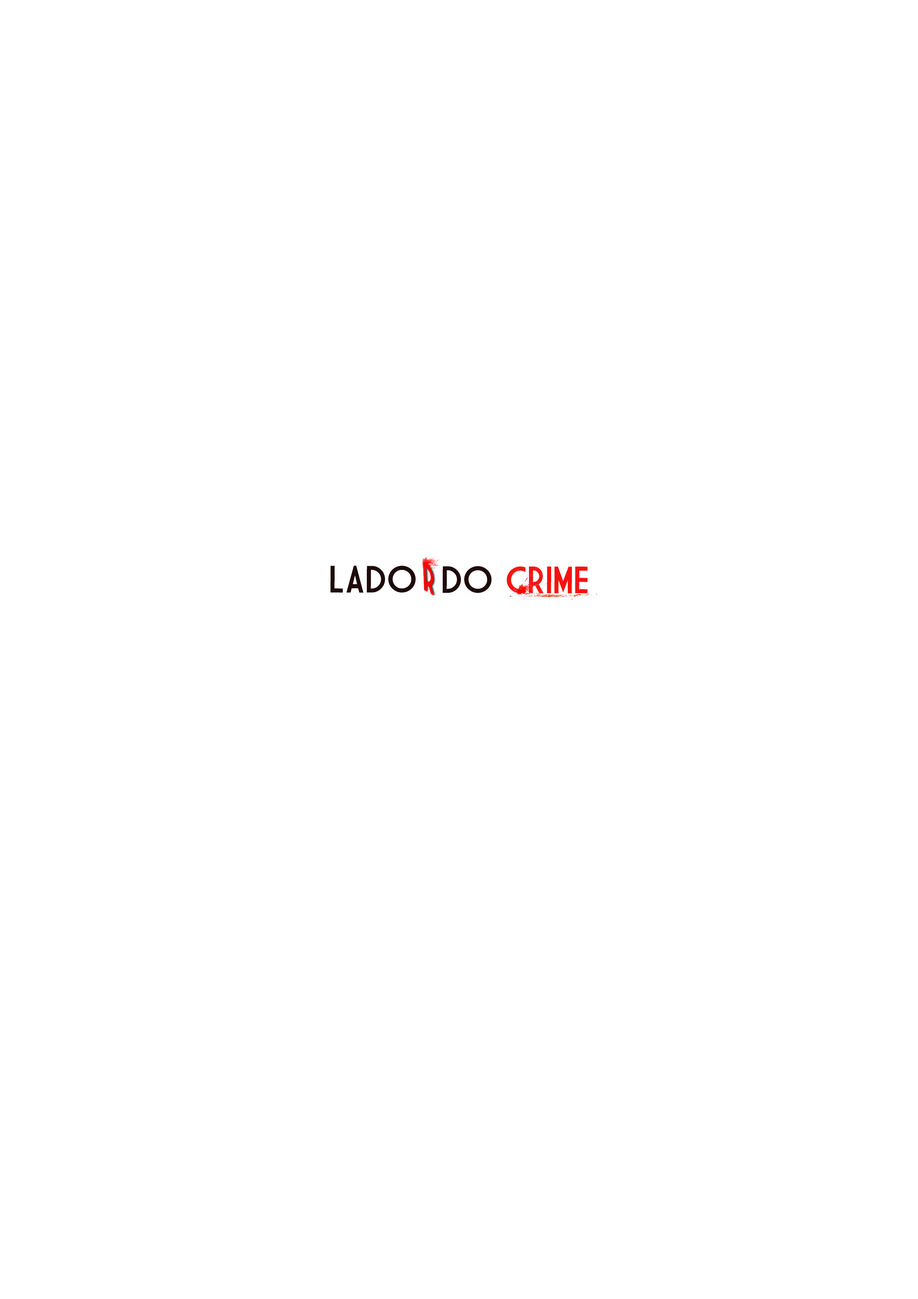
<style>
.page{position:relative;width:918px;height:1299px;background:#ffffff}
.page>*{position:absolute;margin:0}
.t1{font:37px "MarketDeco";letter-spacing:-0.025em;color:#1e0a0a}
.t2{font:37px "MarketDeco";letter-spacing:-0.025em;color:#f71212}
.t3{font:38.4px "MarketDeco";color:#ff0000;scale:0.73 1}
</style>
<div class="page">
<p class="t1" style="left:330px;top:565px;width:258px;height:28px">LADO  DO <span class="t2">CRIME</span></p>
<p class="t3" style="left:423px;top:562px;width:11px;height:33px;rotate:30deg">r</p>
</div>
